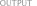
<style>
.page{position:relative;width:37px;height:6px;background:#ffffff}
.page>*{position:absolute;margin:0}
.t1{font:8px "LucidaGrande"}
</style>
<div class="page">
<p class="t1" style="left:0px;top:0px;width:32px;height:6px">OUTPUT</p>
</div>
